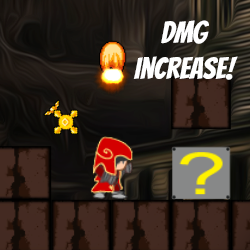
<style>
.page{position:relative;width:250px;height:250px}
.page>*{position:absolute;margin:0}
.t1{font:30px "Bangers-Regular";color:#ffffff}
</style>
<div class="page">
<p class="t1" style="left:133px;top:20px;width:105px;height:60px;text-align:center">dmg<br>increase!</p>
</div>
